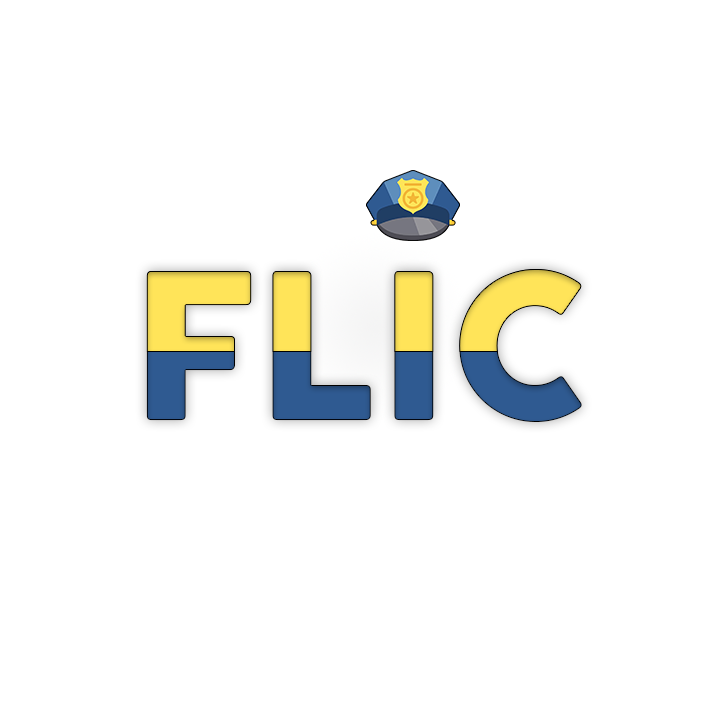
<style>
.page{position:relative;width:721px;height:721px;background:#ffffff}
.page>*{position:absolute;margin:0}
.t1{font:200px "Cocogoose"}
</style>
<div class="page">
<p class="t1" style="left:146px;top:269px;width:436px;height:153px">FLIC</p>
<p class="t1" style="left:146px;top:269px;width:436px;height:153px">FLIC</p>
</div>
